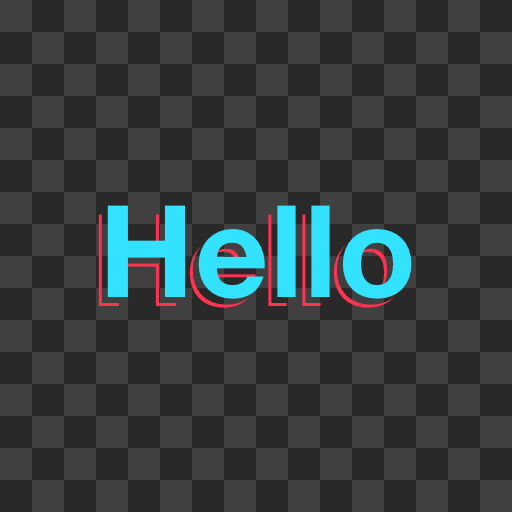
<style>
.page{position:relative;width:512px;height:512px;background:#404040}
.page>*{position:absolute;margin:0}
.t1{font:128px "HelveticaNeue-Bold";letter-spacing:0.01em;color:#33e2ff}
.t2{font:128px "HelveticaNeue-Bold";letter-spacing:0.01em}
</style>
<div class="page">
<p class="t1" style="left:107px;top:205px;width:305px;height:94px">Hello</p>
<p class="t2" style="left:101px;top:211px;width:305px;height:94px">Hello</p>
</div>
